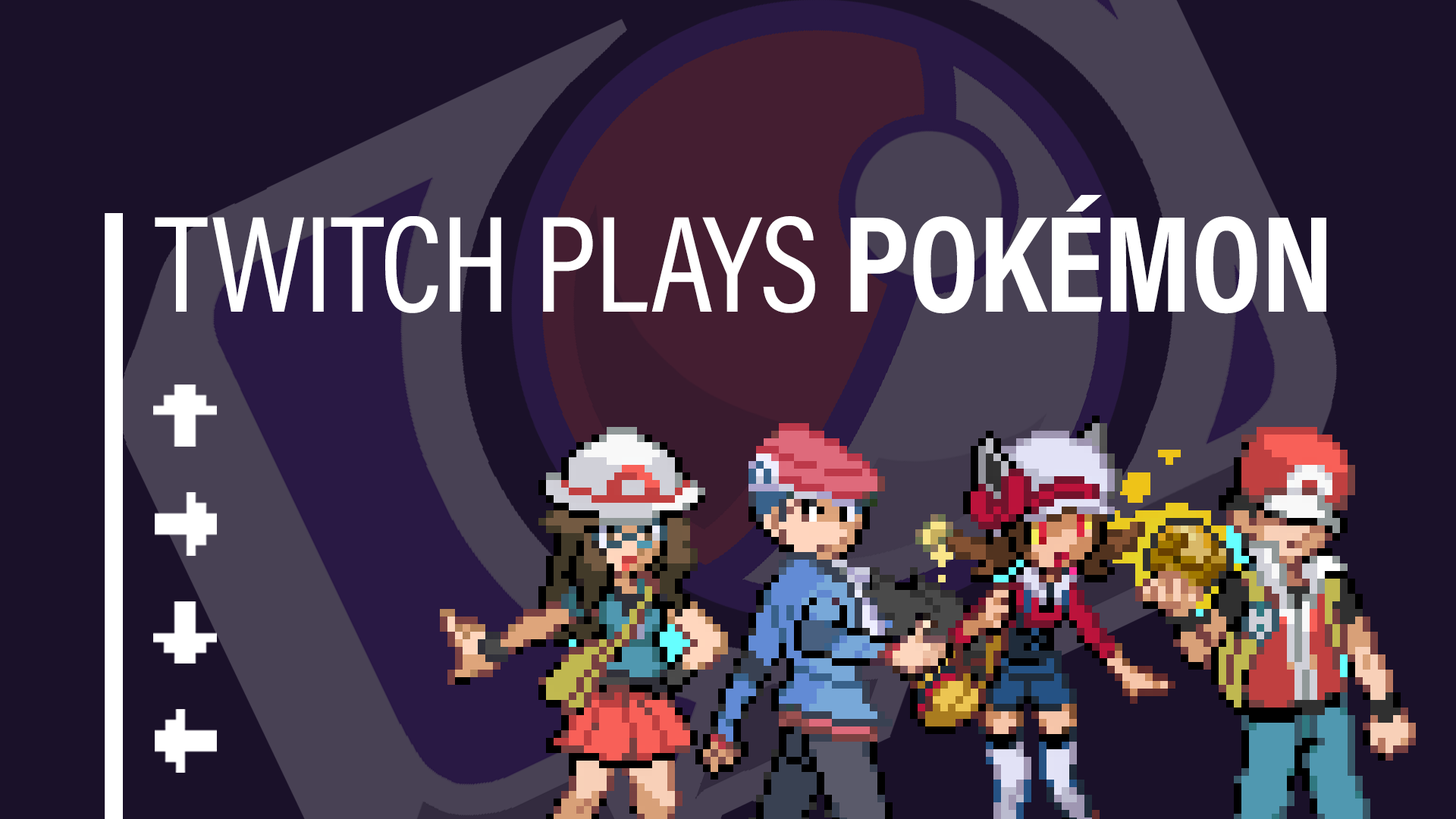
<style>
.page{position:relative;width:1456px;height:819px;background:#1a1129}
.page>*{position:absolute;margin:0}
.t1{font:138.5px "AcuminProCond-Regular";letter-spacing:-0.01em;color:#ffffff;text-transform:uppercase}
.t2{font:138.5px "AcuminProCond-Bold";letter-spacing:-0.01em;color:#ffffff;text-transform:uppercase}
</style>
<div class="page">
<p class="t1" style="left:155px;top:195px;width:1171px;height:119px">Twitch Plays<span class="t2"> Pokémon</span></p>
</div>
